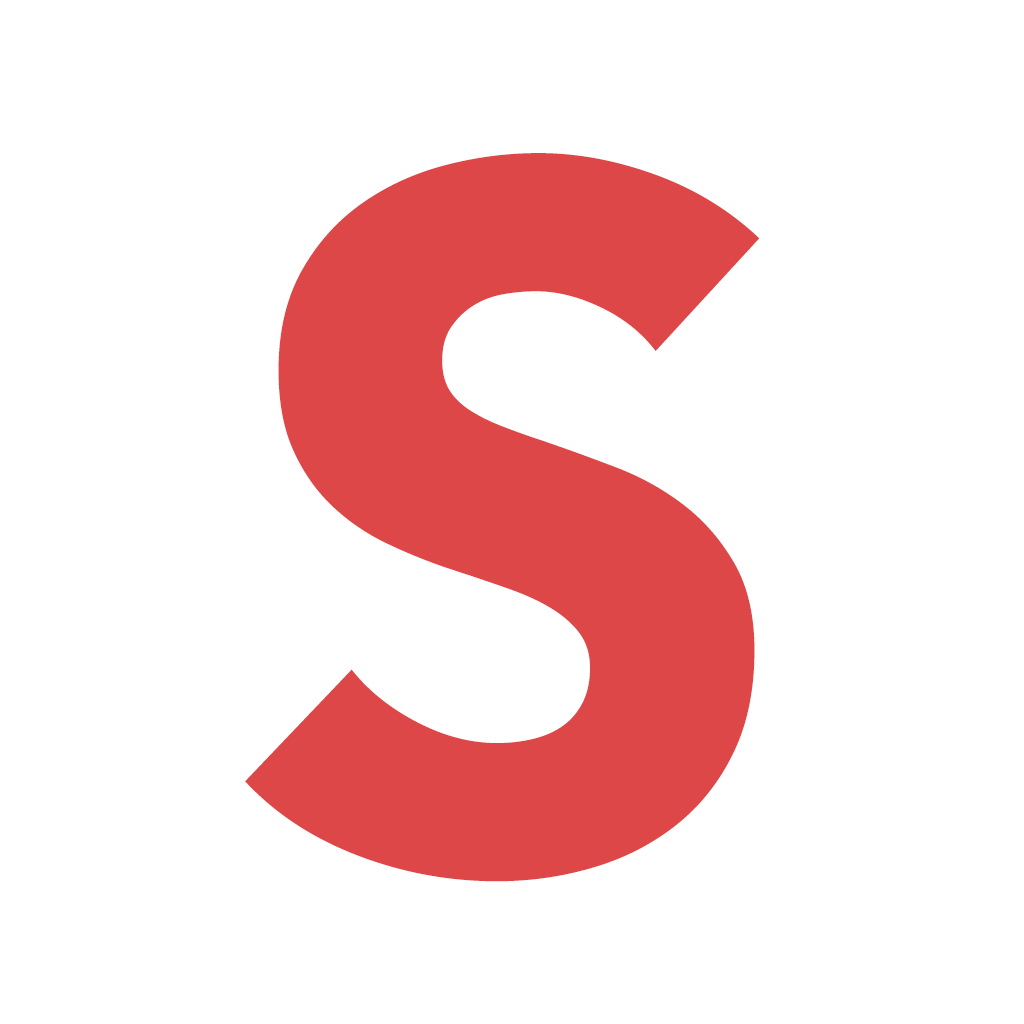
<style>
.page{position:relative;width:1024px;height:1024px;background:#ffffff}
.page>*{position:absolute;margin:0}
.t1{font:978.5px "AvenirNext-Bold";letter-spacing:-0.075em;color:#de4747}
</style>
<div class="page">
<p class="t1" style="left:245px;top:153px;width:515px;height:729px">S</p>
</div>
